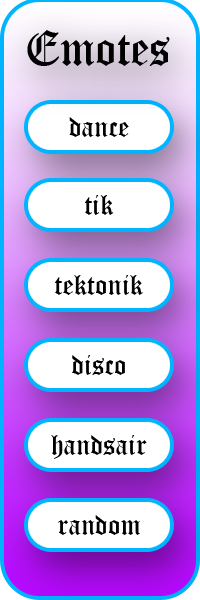
<style>
.page{position:relative;width:200px;height:600px;background:#ffffff}
.page>*{position:absolute;margin:0}
.t1{font:48px "OldEnglishTextMT";color:#000000}
.t2{font:28px "OldEnglishTextMT";color:#000000}
</style>
<div class="page">
<p class="t1" style="left:27px;top:30px;width:143px;height:36px">Emotes</p>
<p class="t2" style="left:69px;top:117px;width:60px;height:20px">dance</p>
<p class="t2" style="left:85px;top:195px;width:29px;height:20px">tik</p>
<p class="t2" style="left:55px;top:275px;width:88px;height:20px">tektonik</p>
<p class="t2" style="left:72px;top:355px;width:53px;height:20px">disco</p>
<p class="t2" style="left:51px;top:435px;width:96px;height:24px">handsair</p>
<p class="t2" style="left:58px;top:515px;width:82px;height:20px">random</p>
</div>
